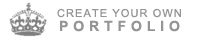
<style>
.page{position:relative;width:200px;height:40px;background:#ffffff}
.page>*{position:absolute;margin:0}
.t1{font:11px "ArialMT";letter-spacing:0.1em;color:#959595}
.t2{font:14px "Arial-BoldMT";letter-spacing:0.35em;color:#959595}
</style>
<div class="page">
<p class="t1" style="left:57px;top:8px;width:124px;height:10px">CREATE YOUR OWN</p>
<p class="t2" style="left:60px;top:20px;width:120px;height:12px">PORTFOLIO</p>
</div>
